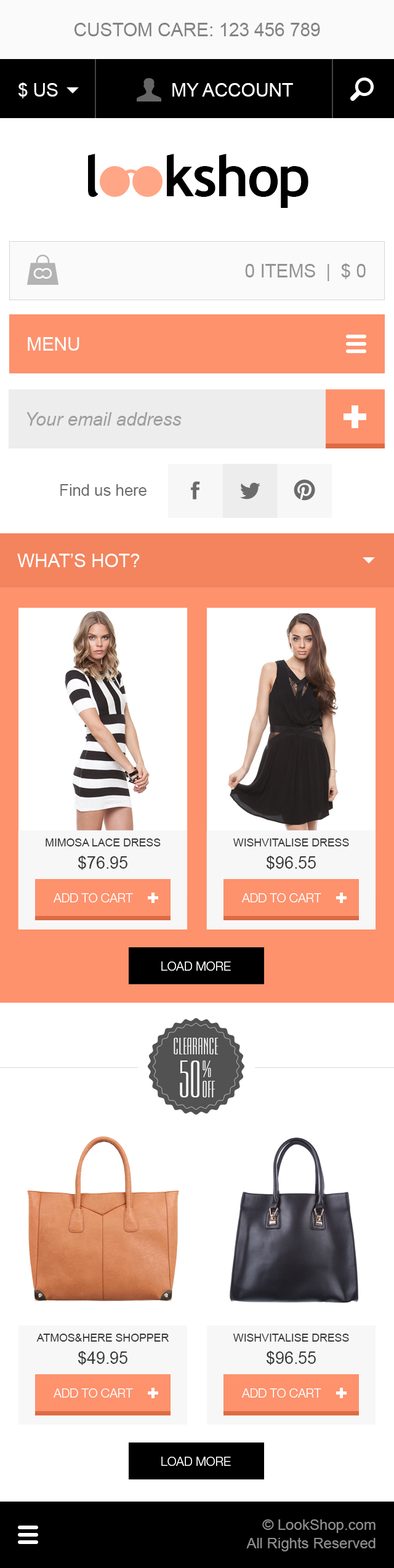
<style>
.page{position:relative;width:394px;height:1568px;background:#ffffff}
.page>*{position:absolute;margin:0}
.t1{font:18.5px "ArialMT";letter-spacing:-0.005em;color:#838383;text-transform:uppercase}
.t2{font:18.5px "ArialMT";letter-spacing:-0.005em;color:#ffffff;text-transform:uppercase}
.t3{font:56.7px "TrebuchetMS-Bold";letter-spacing:-0.025em;color:#000000}
.t4{font:18.5px "ArialMT";letter-spacing:-0.005em;color:#949393;text-transform:uppercase}
.t5{font:18.5px "Arial-ItalicMT";letter-spacing:-0.005em;color:#9f9f9f}
.t6{font:16px "ArialMT";letter-spacing:-0.005em;color:#6c6c6c}
.t7{font:11.1px "ArialMT";letter-spacing:-0.01em;color:#373737;text-transform:uppercase}
.t8{font:16.9px "ArialMT";letter-spacing:-0.01em;color:#373737;text-transform:uppercase}
.t9{font:12.3px "HelveticaNeueLTStd-Lt";color:#ffffff;text-transform:uppercase}
.t10{font:22.1px "AEmpirial";color:#ffffff;text-transform:uppercase}
.t11{font:49.7px "AEmpirial";letter-spacing:-0.025em;color:#ffffff;text-transform:uppercase}
.t12{font:22.1px "AEmpirial";letter-spacing:-0.01em;color:#ffffff;text-transform:uppercase}
.t13{font:14.8px/18.5px "ArialMT";color:#8d8d8d}
</style>
<div class="page">
<p class="t1" style="left:74px;top:23px;width:246px;height:13px">custom care: 123 456 789</p>
<p class="t2" style="left:18px;top:82px;width:40px;height:16px">$ US</p>
<p class="t2" style="left:172px;top:83px;width:121px;height:14px">my account</p>
<p class="t3" style="left:88px;top:154px;width:10px;height:43px">l</p>
<p class="t3" style="left:167px;top:154px;width:141px;height:54px">kshop</p>
<p class="t4" style="left:245px;top:263px;width:120px;height:18px">0 items  |  $ 0</p>
<p class="t2" style="left:28px;top:337px;width:51px;height:14px">menu</p>
<p class="t5" style="left:26px;top:412px;width:155px;height:14px">Your email address</p>
<p class="t6" style="left:60px;top:484px;width:86px;height:12px">Find us here</p>
<p class="t2" style="left:17px;top:554px;width:123px;height:13px">what’s hot?</p>
<p class="t7" style="left:46px;top:838px;width:115px;height:8px">MIMOSA LACE DRESS</p>
<p class="t7" style="left:233px;top:838px;width:116px;height:8px">WishVitalise Dress</p>
<p class="t8" style="left:78px;top:856px;width:49px;height:14px">$76.95</p>
<p class="t8" style="left:266px;top:856px;width:50px;height:14px">$96.55</p>
<p class="t9" style="left:54px;top:893px;width:79px;height:9px">add to cart</p>
<p class="t9" style="left:242px;top:893px;width:79px;height:9px">add to cart</p>
<p class="t9" style="left:161px;top:961px;width:70px;height:10px">load more</p>
<p class="t10" style="left:173px;top:1038px;width:45px;height:16px">clearance</p>
<p class="t11" style="left:180px;top:1061px;width:19px;height:36px">50</p>
<p class="t12" style="left:202px;top:1061px;width:9px;height:16px">%</p>
<p class="t12" style="left:202px;top:1081px;width:13px;height:16px">off</p>
<p class="t7" style="left:36px;top:1334px;width:133px;height:8px">Atmos&amp;Here Shopper</p>
<p class="t7" style="left:233px;top:1334px;width:116px;height:8px">WishVitalise Dress</p>
<p class="t8" style="left:78px;top:1351px;width:49px;height:14px">$49.95</p>
<p class="t8" style="left:266px;top:1351px;width:50px;height:14px">$96.55</p>
<p class="t9" style="left:54px;top:1388px;width:79px;height:10px">add to cart</p>
<p class="t9" style="left:242px;top:1388px;width:79px;height:10px">add to cart</p>
<p class="t9" style="left:161px;top:1457px;width:70px;height:9px">load more</p>
<p class="t13" style="left:246px;top:1519px;width:129px;height:32px;text-align:right">© LookShop.com<br>All Rights Reserved</p>
</div>
